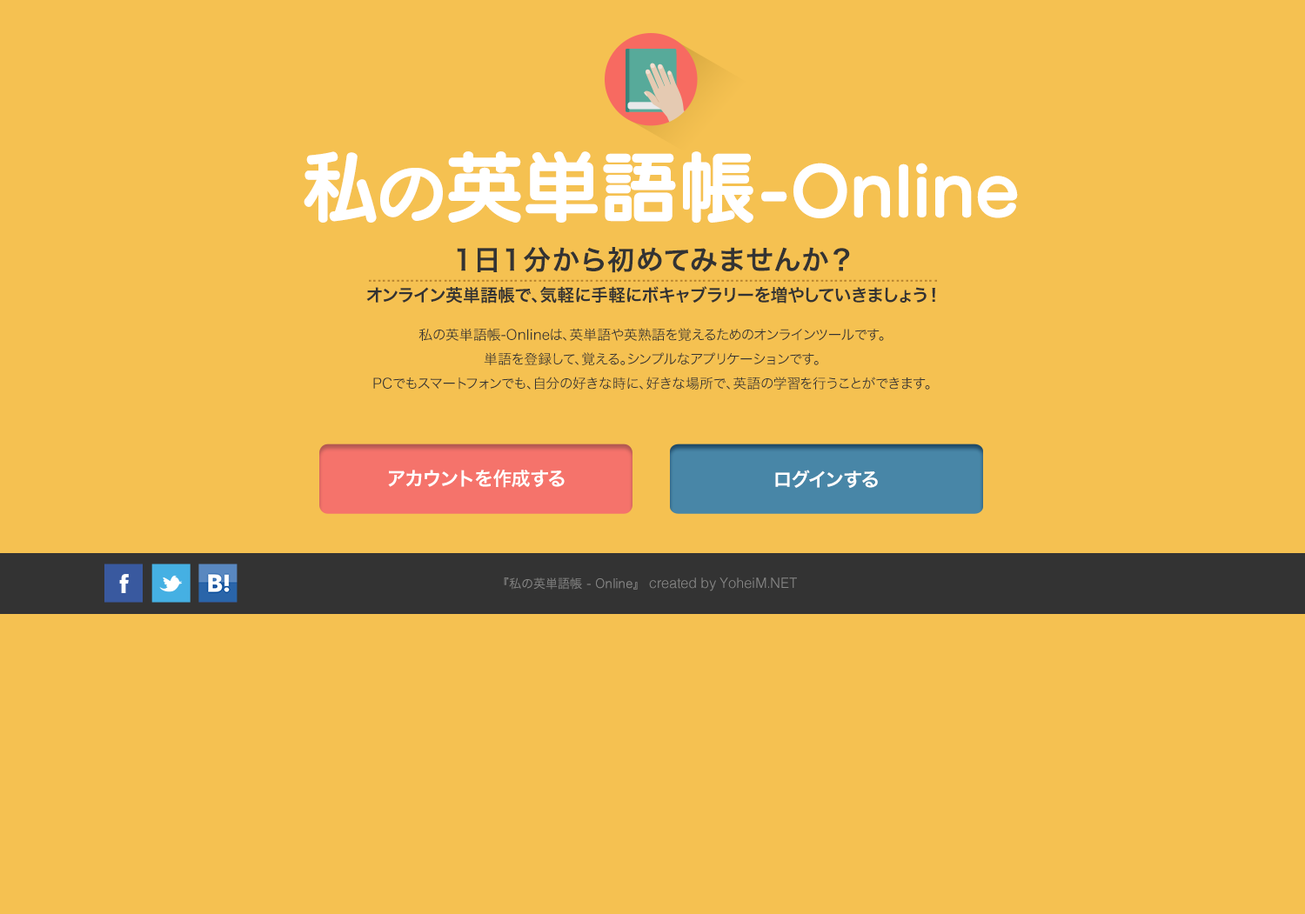
<style>
.page{position:relative;width:1305px;height:914px;background:#f5c151}
.page>*{position:absolute;margin:0}
.t1{font:66.4px "SeuratPro-B";color:#ffffff}
.t2{font:79.2px "SeuratPro-B";color:#ffffff}
.t3{font:17.4px/31.3px "HiraKakuPro-W6";color:#333333}
.t4{font:27.8px/31.3px "HiraKakuPro-W6";letter-spacing:0.05em;color:#333333}
.t5{font:13.9px/24.4px "HiraKakuPro-W3";color:#333333}
.t6{font:19.1px "HiraKakuPro-W6";color:#ffffff}
.t7{font:12.4px "HiraKakuPro-W3";color:#878786}
.t8{font:14.2px "Helvetica-Light";color:#878786}
</style>
<div class="page">
<p class="t1" style="left:304px;top:151px;width:714px;height:73px"><span class="t2">私</span>の<span class="t2">英単語帳</span>-Online</p>
<p class="t3" style="left:366px;top:247px;width:569px;height:57px;text-align:center"><span class="t4">1日1分から初めてみませんか？<br></span>オンライン英単語帳で、気軽に手軽にボキャブラリーを増やしていきましょう！</p>
<p class="t5" style="left:373px;top:328px;width:557px;height:62px;text-align:center">私の英単語帳-Onlineは、英単語や英熟語を覚えるためのオンラインツールです。<br>単語を登録して、覚える。シンプルなアプリケーションです。<br>PCでもスマートフォンでも、自分の好きな時に、好きな場所で、英語の学習を行うことができます。</p>
<p class="t6" style="left:388px;top:469px;width:176px;height:19px">アカウントを作成する</p>
<p class="t6" style="left:775px;top:470px;width:103px;height:19px">ログインする</p>
<p class="t7" style="left:504px;top:577px;width:133px;height:13px">『私の英単語帳 - Online』</p>
<p class="t8" style="left:649px;top:577px;width:148px;height:14px">created by YoheiM.NET</p>
</div>
